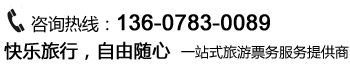
<style>
.page{position:relative;width:350px;height:75px;background:#ffffff}
.page>*{position:absolute;margin:0}
.t1{font:22px "ArialMT";color:#000000;font-weight:bold}
.t2{font:17.1px "MicrosoftYaHei";color:#000000}
.t3{font:14px "MicrosoftYaHei";color:#000000}
.t4{font:18px "MicrosoftYaHei";color:#000000;font-weight:bold}
</style>
<div class="page">
<p class="t1" style="left:31px;top:14px;width:239px;height:19px"><span class="t2">咨询热线：</span>136-0783-0089</p>
<p class="t3" style="left:4px;top:41px;width:345px;height:19px"><span class="t4">快乐旅行，自由随心  </span>一站式旅游票务服务提供商</p>
</div>
